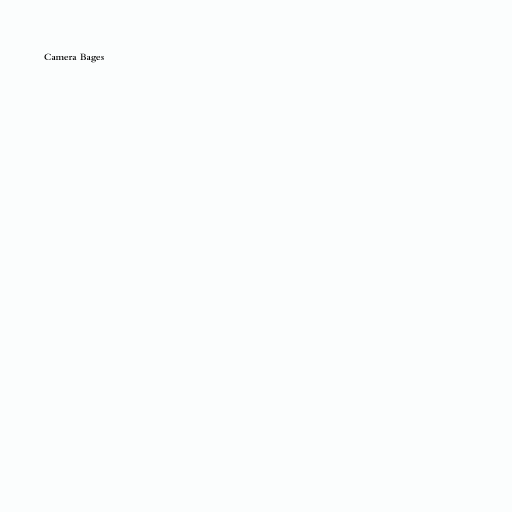
<style>
.page{position:relative;width:512px;height:512px;background:#fbfdfd}
.page>*{position:absolute;margin:0}
.t1{font:10px "BemboMT-SemiBold";color:#000000}
</style>
<div class="page">
<p class="t1" style="left:44px;top:53px;width:60px;height:10px">Camera Bages</p>
</div>
